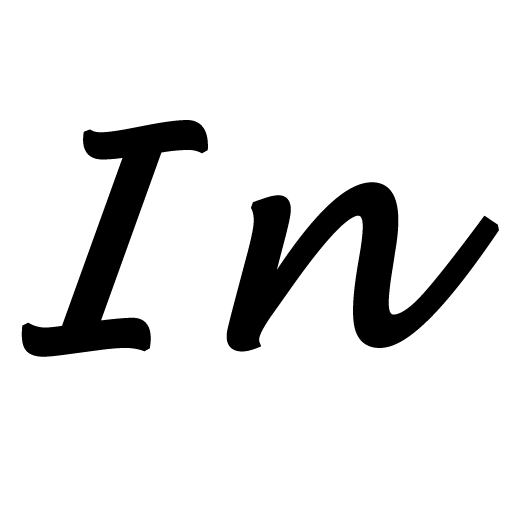
<style>
.page{position:relative;width:512px;height:512px;background:#ffffff}
.page>*{position:absolute;margin:0}
.t1{font:291px "LucidaHandwriting-Italic";letter-spacing:0.06em;color:#000000;font-weight:bold;font-style:italic;scale:0.96 1}
</style>
<div class="page">
<p class="t1" style="left:21px;top:120px;width:478px;height:237px">In</p>
</div>
